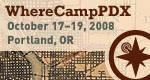
<style>
.page{position:relative;width:150px;height:80px}
.page>*{position:absolute;margin:0}
.t1{font:15px "Rockwell-Bold";color:#551f07}
.t2{font:11.5px "DIN-Black";color:#566057}
</style>
<div class="page">
<p class="t1" style="left:5px;top:5px;width:126px;height:15px">WhereCampPDX</p>
<p class="t2" style="left:7px;top:21px;width:107px;height:25px">October 17–19, 2008<br>Portland, OR</p>
</div>
